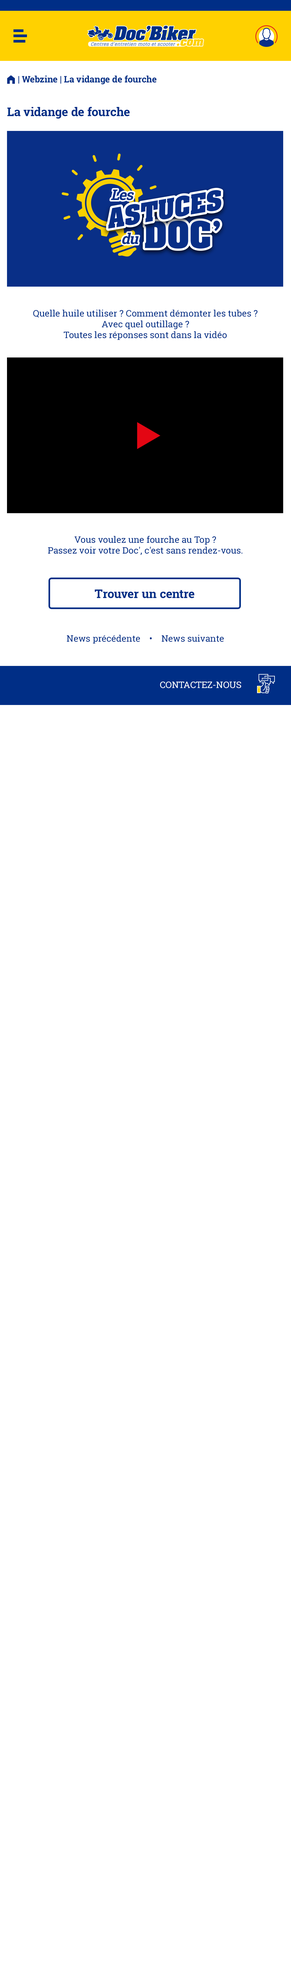
<style>
.page{position:relative;width:291px;height:1987px;background:#ffffff}
.page>*{position:absolute;margin:0}
.t1{font:9px "RobotoSlab-Bold";color:#002e86}
.t2{font:9px "FoundationIconsGeneral-Reg";color:#002e86}
.t3{font:12px "RobotoSlab-Bold";color:#002e86}
.t4{font:9px "RobotoSlab-Regular";color:#002e86}
.t5{font:9px "RobotoSlab-Regular";color:#ffffff;text-transform:uppercase}
</style>
<div class="page">
<p class="t1" style="left:7px;top:75px;width:149px;height:9px"><span class="t2">m </span>| Webzine | La vidange de fourche</p>
<p class="t3" style="left:7px;top:107px;width:123px;height:12px">La vidange de fourche</p>
<p class="t4" style="left:33px;top:309px;width:224px;height:31px;text-align:center">Quelle huile utiliser ? Comment démonter les tubes ? Avec quel outillage ? <br>Toutes les réponses sont dans la vidéo</p>
<p class="t4" style="left:48px;top:536px;width:194px;height:19px;text-align:center">Vous voulez une fourche au Top ? <br>Passez voir votre Doc', c'est sans rendez-vous.</p>
<p class="t3" style="left:95px;top:589px;width:99px;height:9px">Trouver un centre</p>
<p class="t4" style="left:67px;top:635px;width:157px;height:8px">News précédente    •    News suivante</p>
<p class="t5" style="left:160px;top:681px;width:81px;height:7px">contactez-nous</p>
</div>
